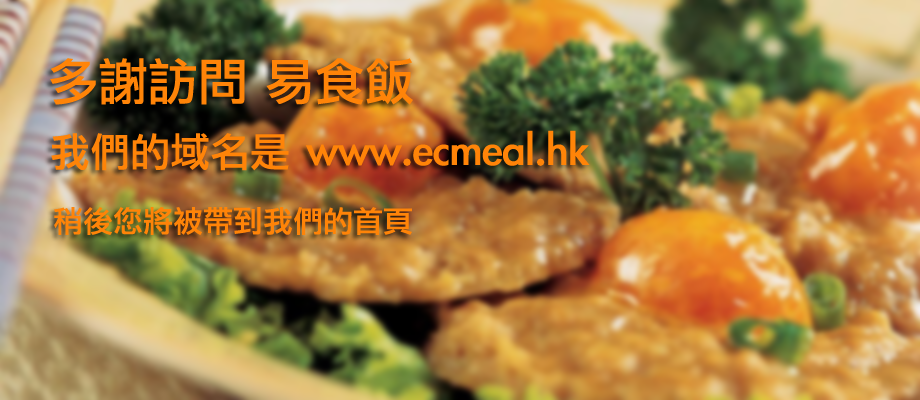
<style>
.page{position:relative;width:920px;height:400px}
.page>*{position:absolute;margin:0}
.t1{font:50px "LiGothicMed";color:#ff8408}
.t2{font:40px "LiGothicMed";color:#ff8408}
.t3{font:30px "LiGothicMed";color:#ff8408}
</style>
<div class="page">
<p class="t1" style="left:50px;top:58px;width:363px;height:47px">多謝訪問 易食飯</p>
<p class="t1" style="left:51px;top:130px;width:539px;height:41px"><span class="t2">我們的域名是</span> www.ecmeal.hk</p>
<p class="t3" style="left:54px;top:207px;width:358px;height:28px">稍後您將被帶到我們的首頁</p>
</div>
